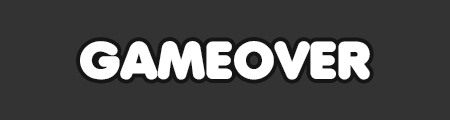
<style>
.page{position:relative;width:450px;height:120px;background:#333333}
.page>*{position:absolute;margin:0}
.t1{font:52px "Debussy";color:#ffffff}
</style>
<div class="page">
<p class="t1" style="left:80px;top:41px;width:290px;height:39px">GAMEOVER</p>
</div>
